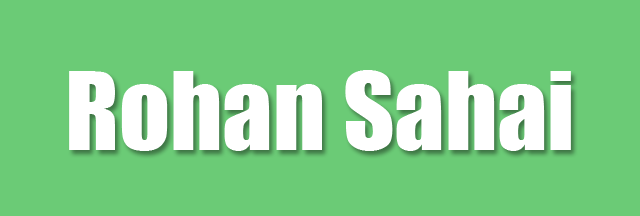
<style>
.page{position:relative;width:640px;height:216px;background:#6bcb76}
.page>*{position:absolute;margin:0}
.t1{font:100px "Impact";color:#ffffff}
.t2{font:14px "Numans-Regular";color:#000000}
</style>
<div class="page">
<p class="t1" style="left:69px;top:70px;width:502px;height:81px"><span class="t2"><br><br><br><br><br><br><br></span>Rohan Sahai</p>
</div>
